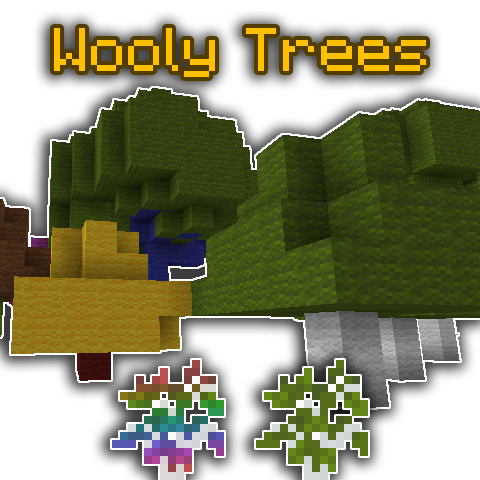
<style>
.page{position:relative;width:480px;height:480px;background:#ffffff}
.page>*{position:absolute;margin:0}
.t1{font:62px "Minecraft-Regular";color:#ffc000}
</style>
<div class="page">
<p class="t1" style="left:54px;top:28px;width:372px;height:49px">Wooly Trees</p>
</div>
